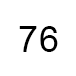
<style>
.page{position:relative;width:76px;height:76px;background:#ffffff}
.page>*{position:absolute;margin:0}
.t1{font:36px "ArialMT";color:#000000}
</style>
<div class="page">
<p class="t1" style="left:19px;top:26px;width:39px;height:26px">76</p>
</div>
